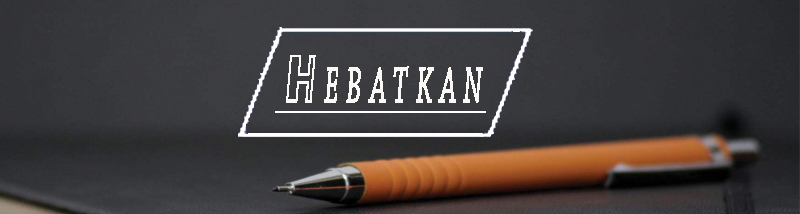
<style>
.page{position:relative;width:800px;height:214px}
.page>*{position:absolute;margin:0}
.t1{font:52.9px "ChaparralPro-Italic";color:#faf9f5;font-weight:bold;scale:0.5 1}
.t2{font:52.9px "TRON";color:#faf9f5;font-weight:bold;font-style:italic;scale:0.5 1}
</style>
<div class="page">
<p class="t1" style="left:286px;top:55px;width:197px;height:48px"><span class="t2">H </span>E B A T K A N</p>
</div>
